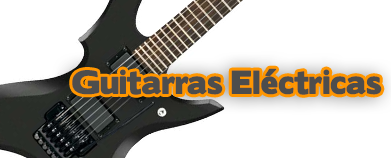
<style>
.page{position:relative;width:391px;height:158px;background:#ffffff}
.page>*{position:absolute;margin:0}
.t1{font:30px "BorisBlackBloxx";color:#4d4d4d}
</style>
<div class="page">
<p class="t1" style="left:72px;top:68px;width:310px;height:27px">Guitarras Eléctricas</p>
</div>
